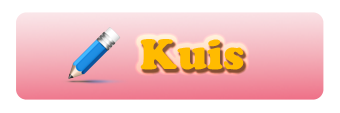
<style>
.page{position:relative;width:340px;height:113px;background:#ffffff}
.page>*{position:absolute;margin:0}
.t1{font:44.3px "CooperBlack";color:#ffbb00}
</style>
<div class="page">
<p class="t1" style="left:140px;top:39px;width:104px;height:31px">Kuis</p>
</div>
